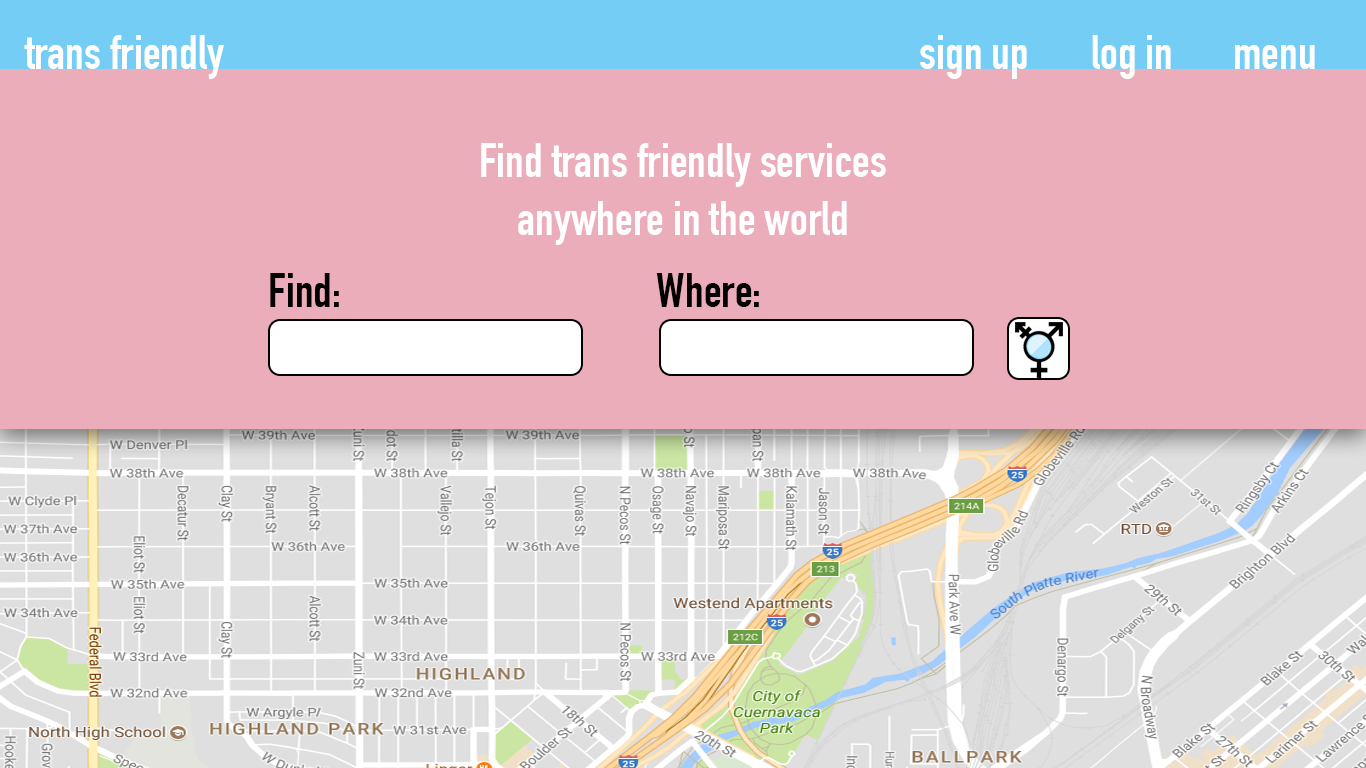
<style>
.page{position:relative;width:1366px;height:768px;background:#ebadb9}
.page>*{position:absolute;margin:0}
.t1{font:48px "DINCondensed-Bold";color:#ffffff}
.t2{font:48px "DINCondensed-Bold";color:#000000}
</style>
<div class="page">
<p class="t1" style="left:24px;top:35px;width:200px;height:44px">trans friendly</p>
<p class="t1" style="left:920px;top:35px;width:251px;height:44px">sign up       log in</p>
<p class="t1" style="left:1235px;top:45px;width:80px;height:24px">menu</p>
<p class="t1" style="left:481px;top:143px;width:405px;height:102px;text-align:center">Find trans friendly services anywhere in the world</p>
<p class="t2" style="left:270px;top:273px;width:69px;height:34px">Find:</p>
<p class="t2" style="left:656px;top:273px;width:103px;height:34px">Where:</p>
</div>
